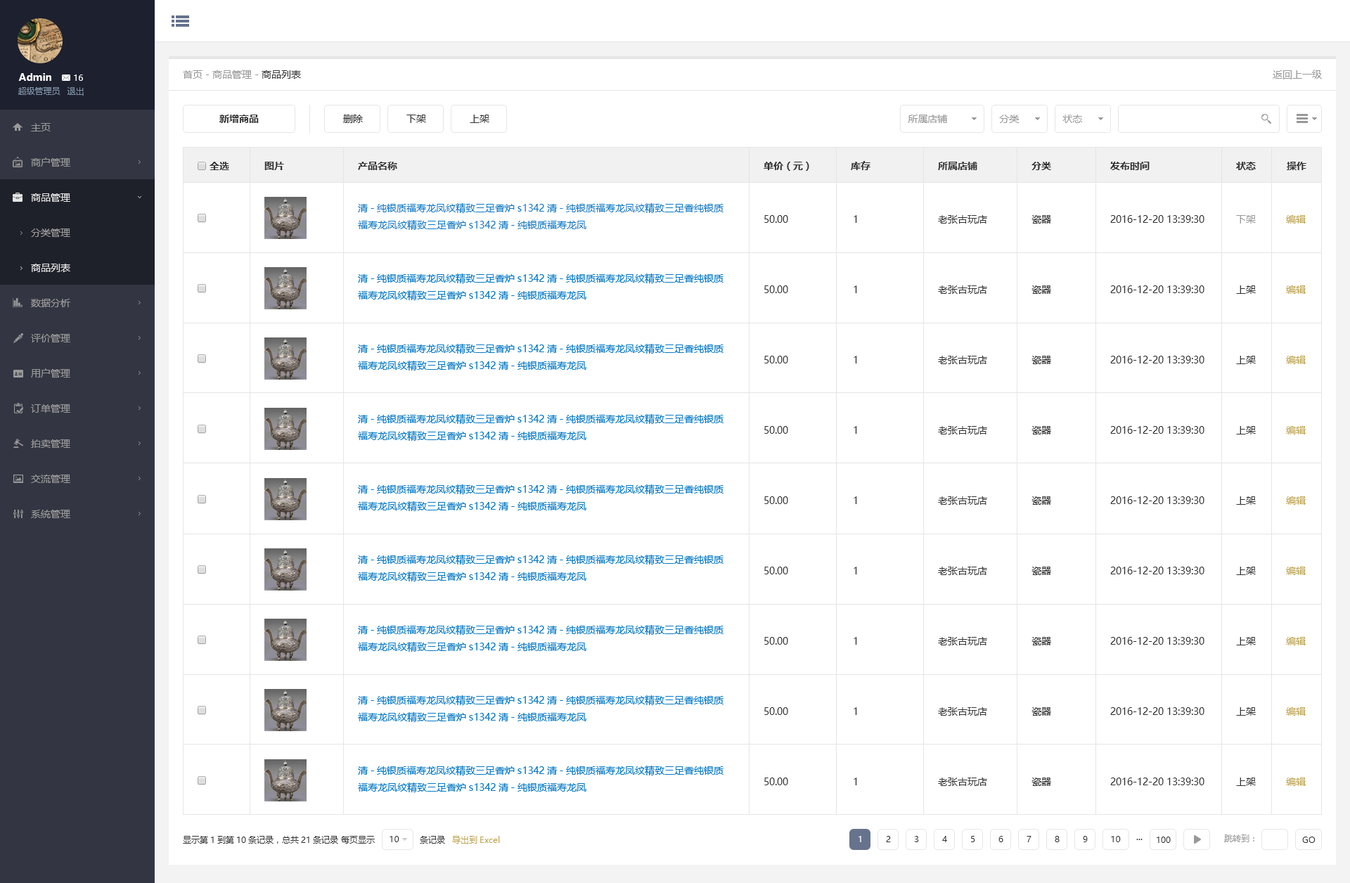
<style>
.page{position:relative;width:1350px;height:883px;background:#ffffff}
.page>*{position:absolute;margin:0}
.t1{font:9.8px "MicrosoftYaHei-Bold";color:#ffffff}
.t2{font:8.4px "MicrosoftYaHei";color:#ffffff}
.t3{font:9.8px "MicrosoftYaHei";color:#999999}
.t4{font:9.8px "MicrosoftYaHei";color:#333333}
.t5{font:8.4px "MicrosoftYaHei";color:#8095a8}
.t6{font:9.8px/35.2px "MicrosoftYaHei";color:#999999}
.t7{font:9.8px/35.2px "MicrosoftYaHei";color:#e6e6e6}
.t8{font:9.8px "MicrosoftYaHei-Bold";color:#333333}
.t9{font:9.8px/16.9px "MicrosoftYaHei";color:#0579c6}
.t10{font:9.8px/70.3px "MicrosoftYaHei";color:#333333}
.t11{font:9.8px/70.3px "MicrosoftYaHei";color:#999999}
.t12{font:9.8px/70.3px "MicrosoftYaHei";color:#bda34a}
.t13{font:8.4px "MicrosoftYaHei";color:#333333}
.t14{font:8.4px "MicrosoftYaHei";color:#bda34a}
.t15{font:8.4px "MicrosoftYaHei";color:#999999}
</style>
<div class="page">
<p class="t1" style="left:18px;top:73px;width:33px;height:8px">Admin</p>
<p class="t2" style="left:74px;top:75px;width:9px;height:6px">16</p>
<p class="t3" style="left:183px;top:70px;width:118px;height:9px">首页 - 商品管理 - <span class="t4">商品列表</span></p>
<p class="t3" style="left:1273px;top:70px;width:49px;height:9px">返回上一级</p>
<p class="t5" style="left:18px;top:87px;width:42px;height:8px">超级管理员</p>
<p class="t5" style="left:67px;top:87px;width:17px;height:9px">退出</p>
<p class="t6" style="left:31px;top:123px;width:39px;height:395px">主页<br>商户管理<br><span class="t7">商品管理<br></span><br><br>数据分析<br>评价管理<br>用户管理<br>订单管理<br>拍卖管理<br>交流管理<br>系统管理</p>
<p class="t8" style="left:219px;top:115px;width:40px;height:8px">新增商品</p>
<p class="t4" style="left:343px;top:115px;width:20px;height:8px">删除</p>
<p class="t4" style="left:406px;top:115px;width:20px;height:8px">下架</p>
<p class="t4" style="left:470px;top:115px;width:19px;height:8px">上架</p>
<p class="t3" style="left:908px;top:115px;width:40px;height:8px">所属店铺</p>
<p class="t3" style="left:999px;top:115px;width:20px;height:8px">分类</p>
<p class="t3" style="left:1063px;top:115px;width:19px;height:8px">状态</p>
<p class="t8" style="left:210px;top:162px;width:19px;height:8px">全选</p>
<p class="t8" style="left:264px;top:162px;width:20px;height:8px">图片</p>
<p class="t8" style="left:358px;top:162px;width:39px;height:8px">产品名称</p>
<p class="t8" style="left:764px;top:162px;width:45px;height:9px">单价（元）</p>
<p class="t8" style="left:851px;top:161px;width:20px;height:9px">库存</p>
<p class="t8" style="left:938px;top:162px;width:39px;height:8px">所属店铺</p>
<p class="t8" style="left:1032px;top:162px;width:19px;height:8px">分类</p>
<p class="t8" style="left:1110px;top:162px;width:40px;height:8px">发布时间</p>
<p class="t8" style="left:1236px;top:162px;width:20px;height:8px">状态</p>
<p class="t8" style="left:1287px;top:162px;width:20px;height:8px">操作</p>
<p class="t9" style="left:358px;top:203px;width:366px;height:27px">清-纯银质福寿龙凤纹精致三足香炉s1342清-纯银质福寿龙凤纹精致三足香纯银质<br>福寿龙凤纹精致三足香炉s1342清-纯银质福寿龙凤</p>
<p class="t10" style="left:764px;top:215px;width:24px;height:570px">50.00<br>50.00<br>50.00<br>50.00<br>50.00<br>50.00<br>50.00<br>50.00<br>50.00</p>
<p class="t10" style="left:854px;top:215px;width:3px;height:570px">1<br>1<br>1<br>1<br>1<br>1<br>1<br>1<br>1</p>
<p class="t10" style="left:938px;top:215px;width:49px;height:571px">老张古玩店<br>老张古玩店<br>老张古玩店<br>老张古玩店<br>老张古玩店<br>老张古玩店<br>老张古玩店<br>老张古玩店<br>老张古玩店</p>
<p class="t10" style="left:1032px;top:215px;width:19px;height:571px">瓷器<br>瓷器<br>瓷器<br>瓷器<br>瓷器<br>瓷器<br>瓷器<br>瓷器<br>瓷器</p>
<p class="t10" style="left:1110px;top:215px;width:95px;height:570px">2016-12-20 13:39:30<br>2016-12-20 13:39:30<br>2016-12-20 13:39:30<br>2016-12-20 13:39:30<br>2016-12-20 13:39:30<br>2016-12-20 13:39:30<br>2016-12-20 13:39:30<br>2016-12-20 13:39:30<br>2016-12-20 13:39:30</p>
<p class="t10" style="left:1236px;top:215px;width:20px;height:571px"><span class="t11">下架<br></span>上架<br>上架<br>上架<br>上架<br>上架<br>上架<br>上架<br>上架</p>
<p class="t12" style="left:1286px;top:215px;width:20px;height:571px">编辑<br>编辑<br>编辑<br>编辑<br>编辑<br>编辑<br>编辑<br>编辑<br>编辑</p>
<p class="t6" style="left:31px;top:229px;width:39px;height:43px">分类管理<br><span class="t7">商品列表</span></p>
<p class="t13" style="left:183px;top:836px;width:262px;height:8px">显示第1到第10条记录，总共21条记录 每页显示                条记录</p>
<p class="t13" style="left:390px;top:836px;width:9px;height:6px">10</p>
<p class="t14" style="left:452px;top:836px;width:48px;height:9px">导出到Excel</p>
<p class="t2" style="left:859px;top:836px;width:2px;height:6px">1</p>
<p class="t13" style="left:886px;top:836px;width:5px;height:6px">2</p>
<p class="t13" style="left:914px;top:836px;width:5px;height:6px">3</p>
<p class="t13" style="left:942px;top:836px;width:5px;height:6px">4</p>
<p class="t13" style="left:971px;top:836px;width:4px;height:6px">5</p>
<p class="t13" style="left:999px;top:836px;width:4px;height:6px">6</p>
<p class="t13" style="left:1027px;top:836px;width:5px;height:6px">7</p>
<p class="t13" style="left:1055px;top:836px;width:5px;height:6px">8</p>
<p class="t13" style="left:1083px;top:836px;width:5px;height:6px">9</p>
<p class="t13" style="left:1111px;top:836px;width:10px;height:6px">10</p>
<p class="t13" style="left:1136px;top:839px;width:7px;height:1px">...</p>
<p class="t13" style="left:1157px;top:837px;width:14px;height:6px">100</p>
<p class="t15" style="left:1224px;top:835px;width:30px;height:7px">跳转到：</p>
<p class="t13" style="left:1302px;top:837px;width:14px;height:6px">GO</p>
</div>
